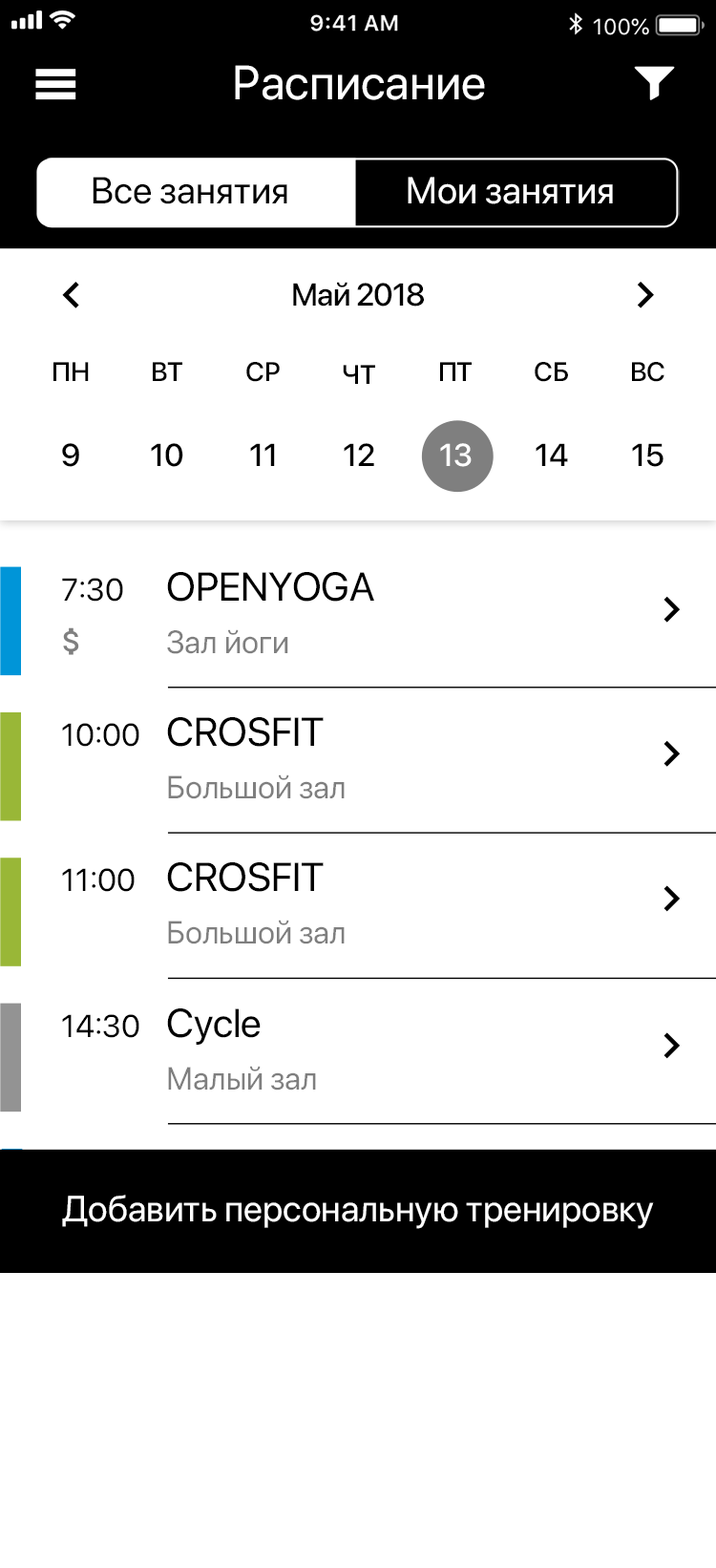
<style>
.page{position:relative;width:716px;height:1568px;background:#ffffff}
.page>*{position:absolute;margin:0}
.t1{font:47.7px "SFProDisplay-Regular";color:#ffffff}
.t2{font:37.2px "SFProDisplay-Regular";color:#000000}
.t3{font:37.2px "SFProDisplay-Regular";color:#ffffff}
.t4{font:31.5px "SFProDisplay-Medium";letter-spacing:-0.023em;color:#000000}
.t5{font:26.7px "SFProDisplay-Medium";color:#000000}
.t6{font:31.5px "SFProDisplay-Medium";color:#000000}
.t7{font:31.5px "SFProDisplay-Medium";color:#ffffff}
.t8{font:31.5px "SFProDisplay-Regular";color:#000000}
.t9{font:40.1px "SFProDisplay-Regular";color:#000000}
.t10{font:31.8px "SFProDisplay-Regular";color:#7f7f7f}
.t11{font:36.3px "SFProDisplay-Regular";color:#ffffff}
</style>
<div class="page">
<p class="t1" style="left:235px;top:65px;width:250px;height:35px">Расписание</p>
<p class="t2" style="left:93px;top:177px;width:194px;height:27px">Все занятия</p>
<p class="t3" style="left:408px;top:177px;width:205px;height:27px">Мои занятия</p>
<p class="t4" style="left:293px;top:282px;width:131px;height:25px">Май 2018</p>
<p class="t5" style="left:53px;top:362px;width:36px;height:19px">ПН</p>
<p class="t5" style="left:153px;top:362px;width:29px;height:19px">ВТ</p>
<p class="t5" style="left:246px;top:362px;width:34px;height:20px">СР</p>
<p class="t5" style="left:343px;top:365px;width:32px;height:19px">ЧТ</p>
<p class="t5" style="left:440px;top:362px;width:32px;height:19px">ПТ</p>
<p class="t5" style="left:535px;top:362px;width:33px;height:20px">СБ</p>
<p class="t5" style="left:632px;top:362px;width:33px;height:20px">ВС</p>
<p class="t6" style="left:62px;top:443px;width:17px;height:24px">9</p>
<p class="t6" style="left:151px;top:443px;width:32px;height:24px">10</p>
<p class="t6" style="left:250px;top:443px;width:25px;height:23px">11</p>
<p class="t6" style="left:344px;top:443px;width:30px;height:23px">12</p>
<p class="t7" style="left:440px;top:443px;width:32px;height:24px">13</p>
<p class="t6" style="left:536px;top:443px;width:32px;height:23px">14</p>
<p class="t6" style="left:632px;top:443px;width:32px;height:24px">15</p>
<p class="t8" style="left:62px;top:578px;width:61px;height:24px">7:30</p>
<p class="t9" style="left:167px;top:572px;width:207px;height:30px">OPENYOGA</p>
<p class="t10" style="left:167px;top:629px;width:121px;height:25px">Зал йоги</p>
<p class="t8" style="left:62px;top:723px;width:77px;height:24px">10:00</p>
<p class="t9" style="left:167px;top:717px;width:157px;height:30px">CROSFIT</p>
<p class="t10" style="left:168px;top:774px;width:177px;height:25px">Большой зал</p>
<p class="t8" style="left:62px;top:868px;width:73px;height:24px">11:00</p>
<p class="t9" style="left:167px;top:862px;width:157px;height:30px">CROSFIT</p>
<p class="t10" style="left:168px;top:920px;width:177px;height:24px">Большой зал</p>
<p class="t9" style="left:167px;top:1008px;width:94px;height:37px">Cycle</p>
<p class="t8" style="left:62px;top:1014px;width:77px;height:24px">14:30</p>
<p class="t10" style="left:168px;top:1066px;width:148px;height:25px">Малый зал</p>
<p class="t11" style="left:62px;top:1195px;width:592px;height:34px">Добавить персональную тренировку</p>
</div>
